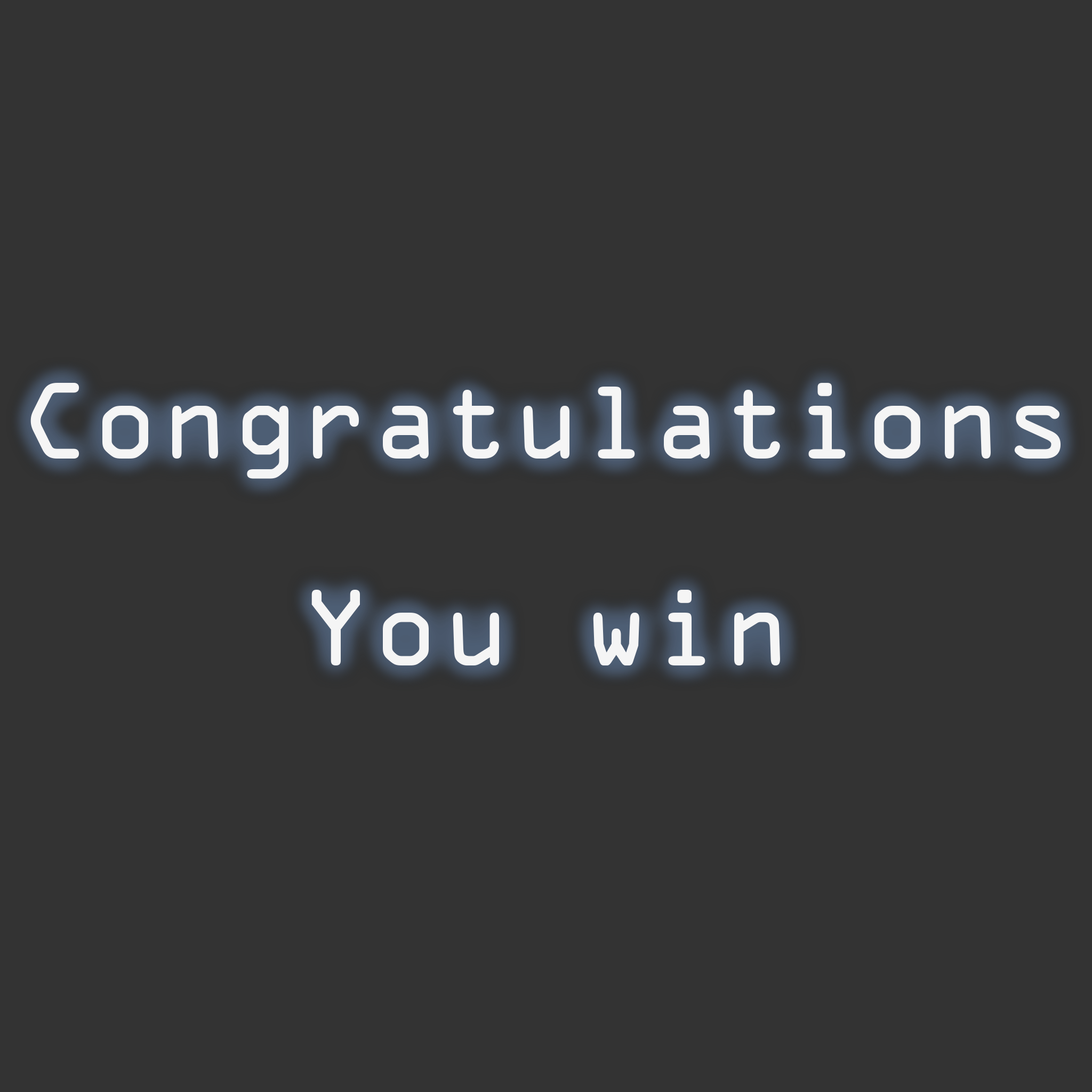
<style>
.page{position:relative;width:1092px;height:1092px;background:#333333}
.page>*{position:absolute;margin:0}
.t1{font:97.5px "OCRAStd";color:#f5f5f5}
</style>
<div class="page">
<p class="t1" style="left:30px;top:383px;width:1031px;height:96px">Congratulations</p>
<p class="t1" style="left:311px;top:590px;width:469px;height:75px">You win</p>
</div>
